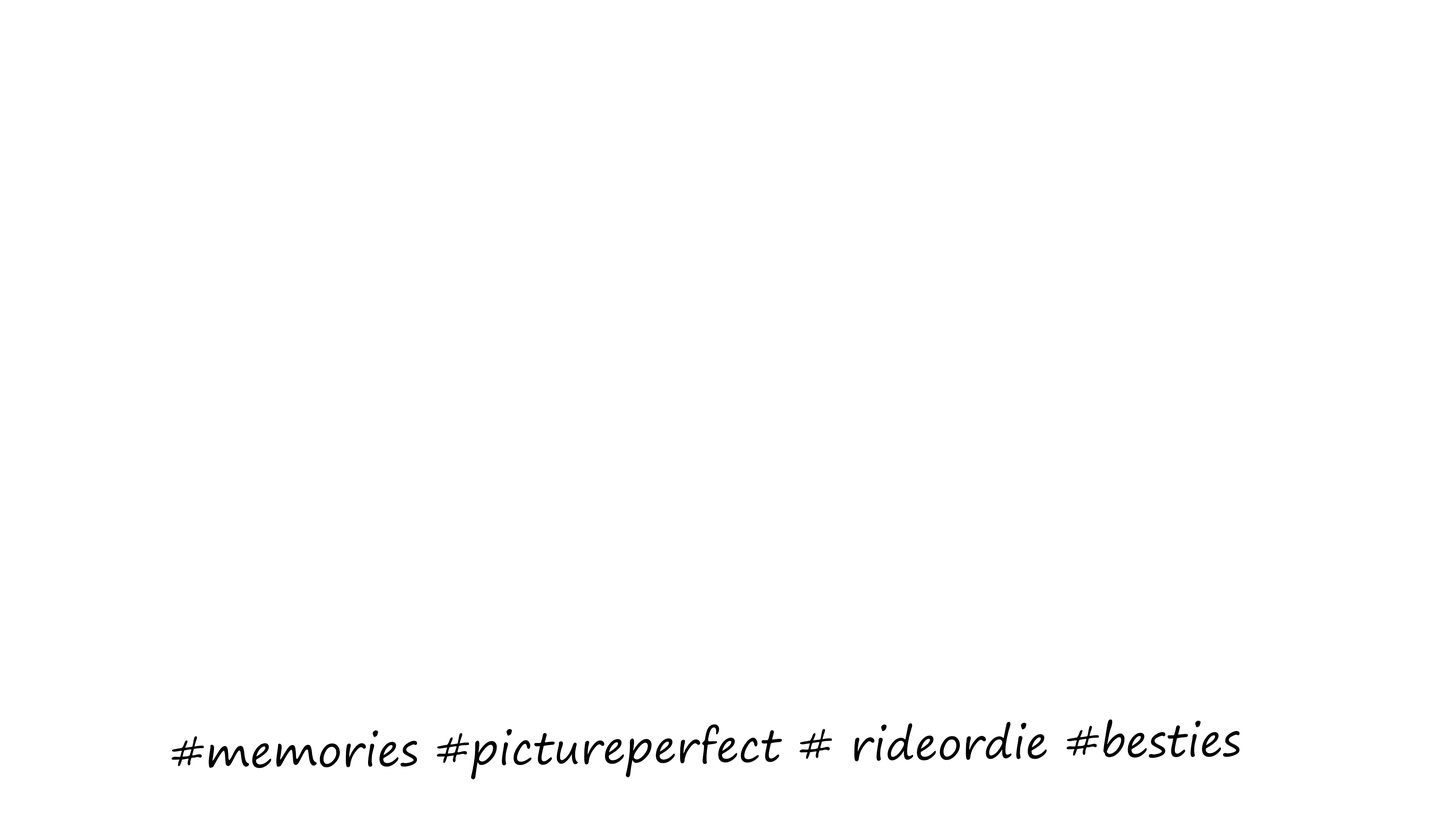
<style>
.page{position:relative;width:1430px;height:834px;background:#ffffff}
.page>*{position:absolute;margin:0}
.t1{font:43.6px "SegoePrint";color:#000000}
</style>
<div class="page">
<p class="t1" style="left:171px;top:719px;width:1069px;height:60px;rotate:-1deg">#memories #pictureperfect # rideordie #besties</p>
</div>
